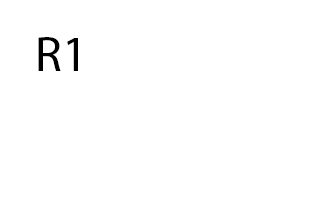
<style>
.page{position:relative;width:320px;height:200px;background:#ffffff}
.page>*{position:absolute;margin:0}
.t1{font:12px "MyriadPro-Regular";color:#000000}
</style>
<div class="page">
<p class="t1" style="left:38px;top:37px;width:40px;height:34px">R1</p>
</div>
